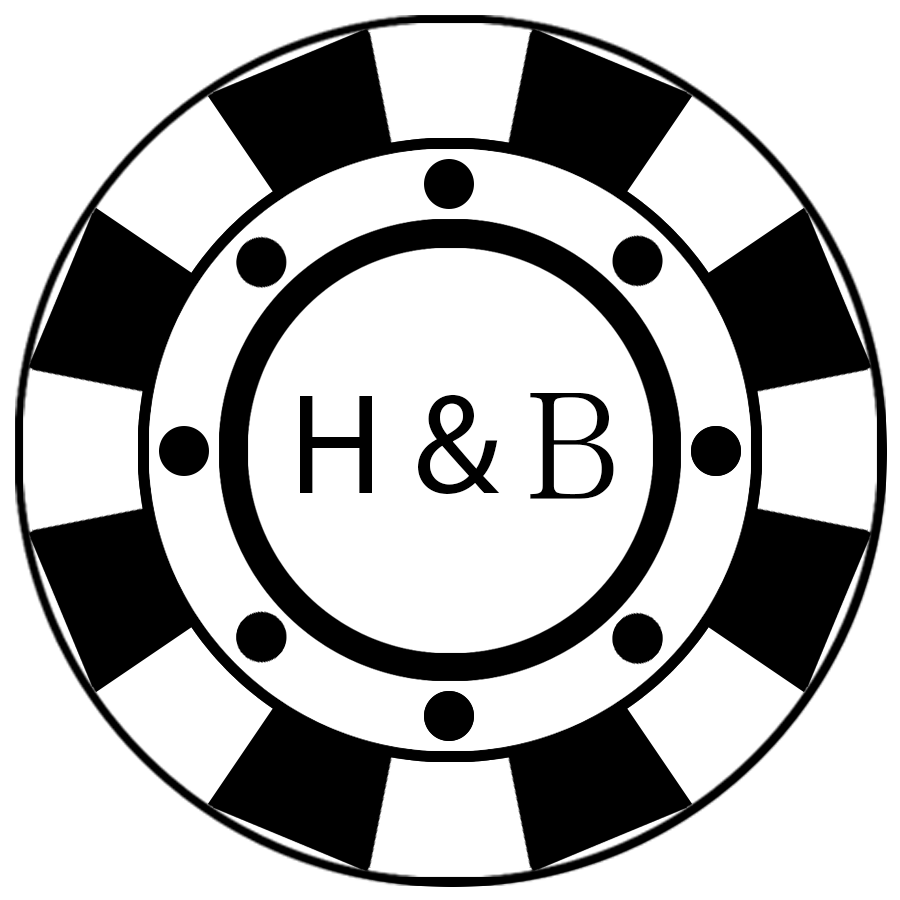
<style>
.page{position:relative;width:900px;height:900px;background:#ffffff}
.page>*{position:absolute;margin:0}
.t1{font:144px "MyriadPro-Regular";color:#000000}
.t2{font:144px "DFKaiShu-SB-Estd-BF";color:#000000}
</style>
<div class="page">
<p class="t1" style="left:300px;top:393px;width:314px;height:106px">H &amp;<span class="t2">Ｂ</span></p>
</div>
